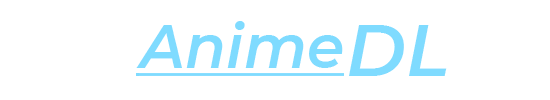
<style>
.page{position:relative;width:550px;height:100px;background:#ffffff}
.page>*{position:absolute;margin:0}
.t1{font:60px "Montserrat-SemiBoldItalic";color:#7fdbff}
.t2{font:72px "Montserrat-SemiBoldItalic";color:#7fdbff}
</style>
<div class="page">
<p class="t1" style="left:136px;top:21px;width:207px;height:47px">Anime</p>
<p class="t2" style="left:349px;top:25px;width:98px;height:51px">DL</p>
</div>
